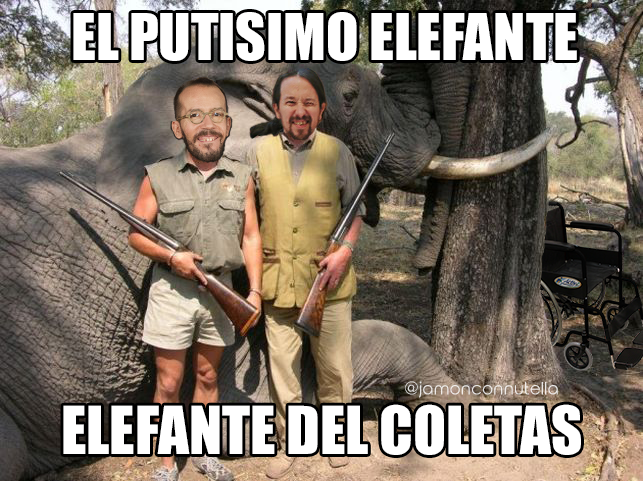
<style>
.page{position:relative;width:643px;height:481px}
.page>*{position:absolute;margin:0}
.t1{font:59.4px "Impact";color:#ffffff}
.t2{font:16.9px "RoundedElegance-Regular";color:#ece9e7}
.t3{font:61px "Impact";color:#ffffff}
</style>
<div class="page">
<p class="t1" style="left:73px;top:12px;width:504px;height:49px">EL PUTISIMO ELEFANTE</p>
<p class="t2" style="left:405px;top:381px;width:153px;height:17px">@jamonconnutella</p>
<p class="t3" style="left:63px;top:404px;width:518px;height:51px">ELEFANTE DEL COLETAS</p>
</div>
